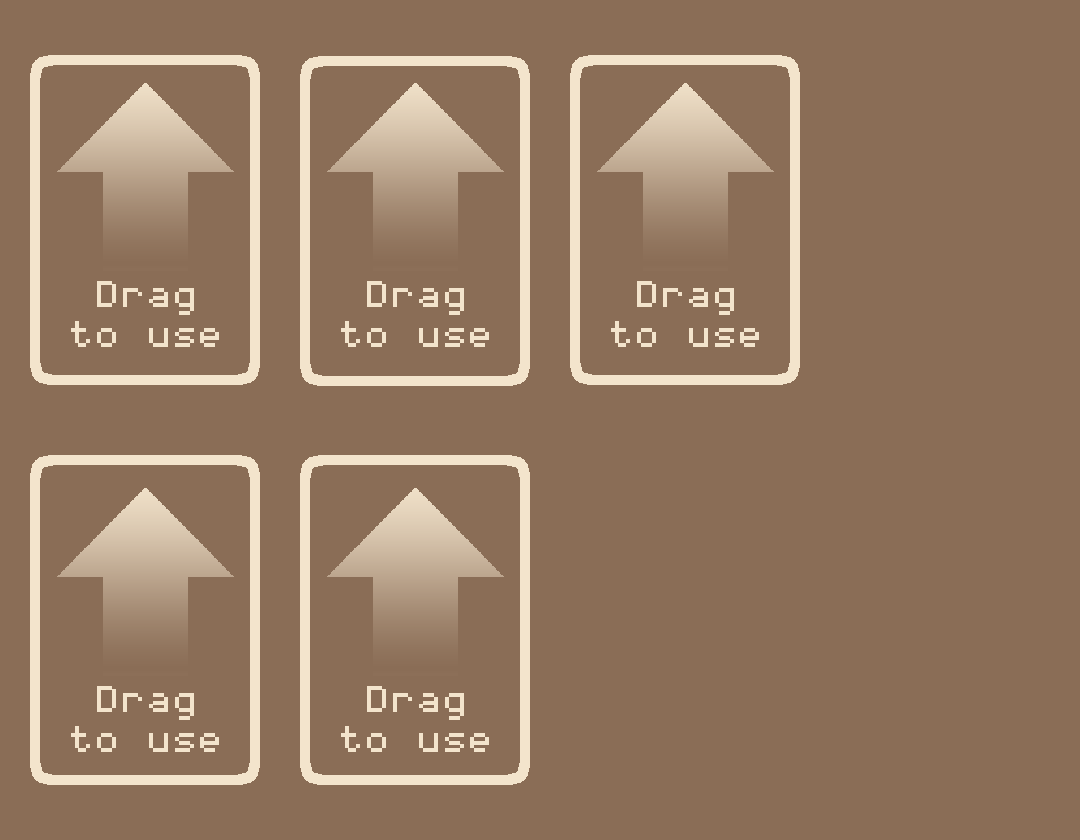
<style>
.page{position:relative;width:1080px;height:840px;background:#8a6d56}
.page>*{position:absolute;margin:0}
.t1{font:60px "Coder's-Crux";letter-spacing:0.05em;color:#f3e4cc}
</style>
<div class="page">
<p class="t1" style="left:71px;top:281px;width:148px;height:66px;text-align:center">Drag<br>to use</p>
<p class="t1" style="left:341px;top:281px;width:148px;height:66px;text-align:center">Drag<br>to use</p>
<p class="t1" style="left:611px;top:281px;width:148px;height:66px;text-align:center">Drag<br>to use</p>
<p class="t1" style="left:71px;top:686px;width:148px;height:66px;text-align:center">Drag<br>to use</p>
<p class="t1" style="left:341px;top:686px;width:148px;height:66px;text-align:center">Drag<br>to use</p>
</div>
